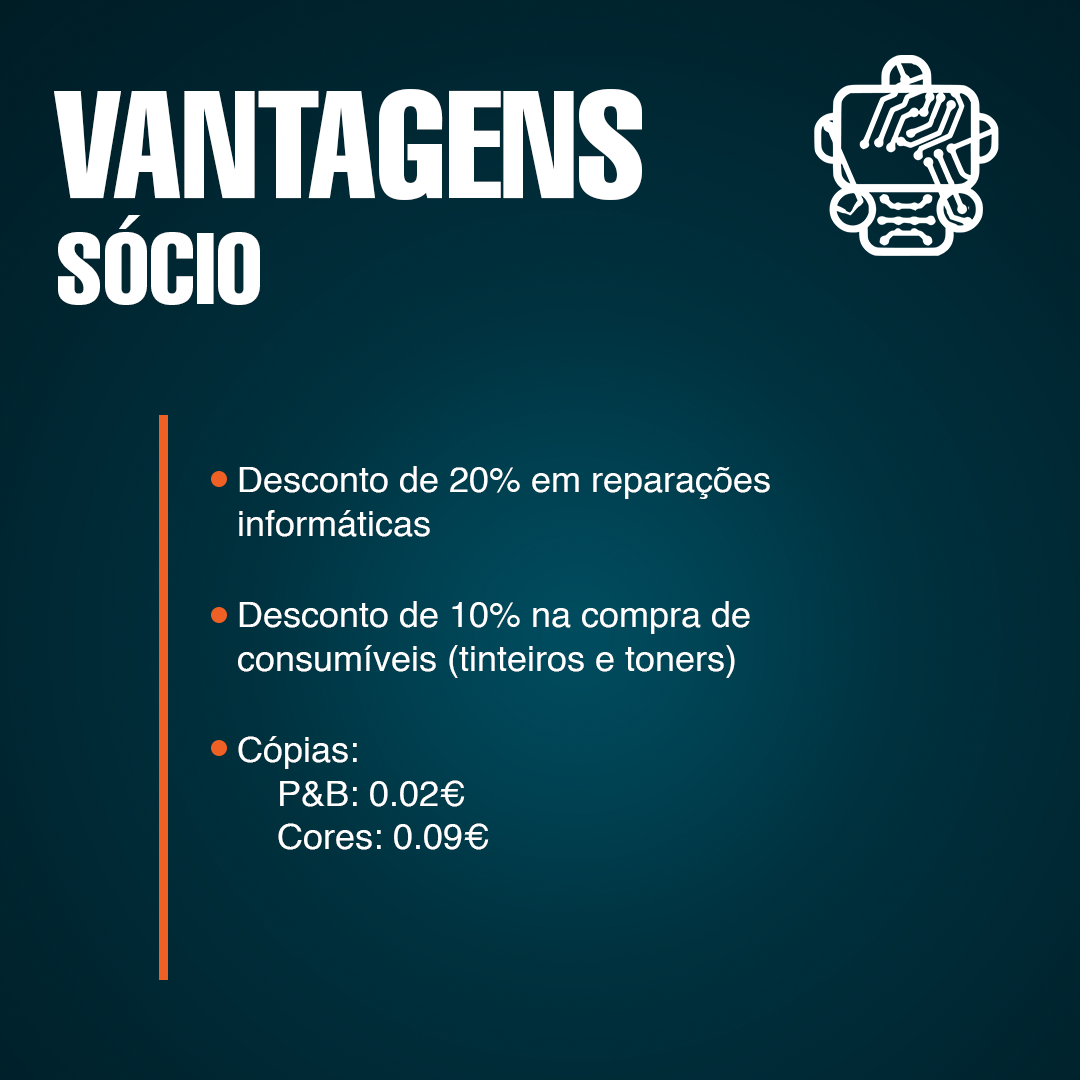
<style>
.page{position:relative;width:1080px;height:1080px}
.page>*{position:absolute;margin:0}
.t1{font:150px "Helvetica-Compressed";color:#ffffff}
.t2{font:100px "Helvetica-Compressed";color:#ffffff}
.t3{font:36px "Helvetica";color:#ffffff}
</style>
<div class="page">
<p class="t1" style="left:54px;top:89px;width:588px;height:111px">VANTAGENS</p>
<p class="t2" style="left:58px;top:215px;width:202px;height:90px">SÓCIO</p>
<p class="t3" style="left:239px;top:466px;width:531px;height:71px">Desconto de 20% em reparações informáticas</p>
<p class="t3" style="left:238px;top:601px;width:512px;height:77px">Desconto de 10% na compra de consumíveis (tinteiros e toners)</p>
<p class="t3" style="left:238px;top:736px;width:251px;height:114px">Cópias:  <br>    P&amp;B: 0.02€<br>    Cores: 0.09€</p>
</div>
